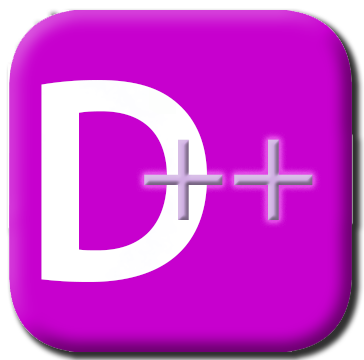
<style>
.page{position:relative;width:364px;height:360px;background:#c700ce}
.page>*{position:absolute;margin:0}
.t1{font:133.3px "KozGoPr6N-Medium";color:#cfafe2}
</style>
<div class="page">
<p class="t1" style="left:144px;top:139px;width:169px;height:81px">++</p>
</div>
